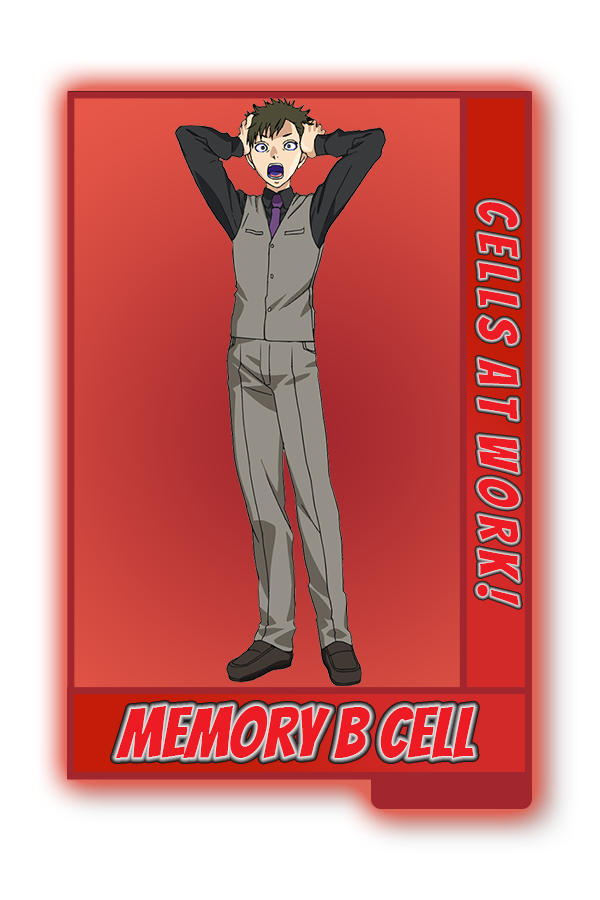
<style>
.page{position:relative;width:600px;height:900px;background:#ffffff}
.page>*{position:absolute;margin:0}
.t1{font:54px "Bangers-Regular";color:#ed1c24}
.t2{font:70px "Bangers-Regular";color:#ed1c24}
</style>
<div class="page">
<p class="t1" style="left:477px;top:202px;width:42px;height:404px;rotate:90deg">C e l l S  A t  W o r k !</p>
<p class="t2" style="left:115px;top:706px;width:359px;height:53px">Memory b cell</p>
</div>
